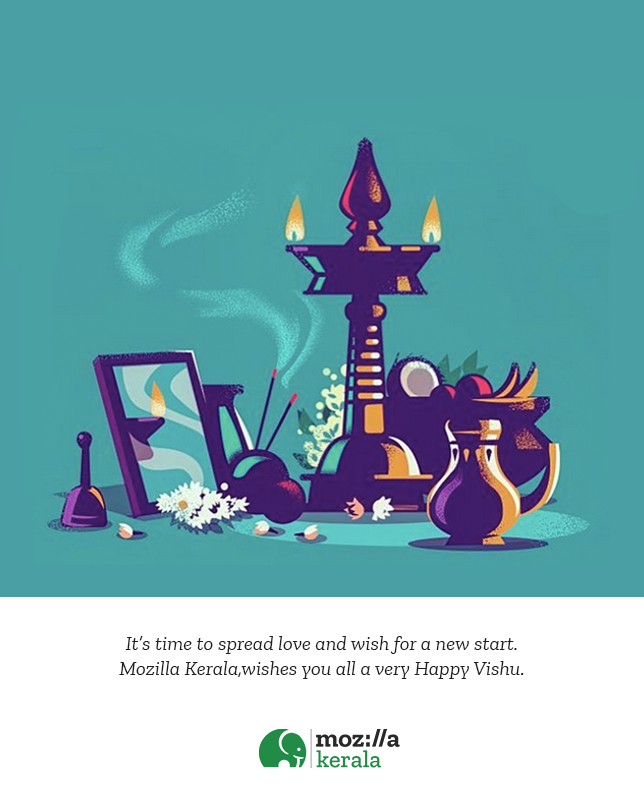
<style>
.page{position:relative;width:644px;height:796px;background:#ffffff}
.page>*{position:absolute;margin:0}
.t1{font:20.4px "ZillaSlab-RegularItalic";color:#1e1e1e}
</style>
<div class="page">
<p class="t1" style="left:119px;top:636px;width:405px;height:43px;text-align:center">It’s time to spread love and wish for a new start.<br>Mozilla Kerala,wishes you all a very Happy Vishu.</p>
</div>
